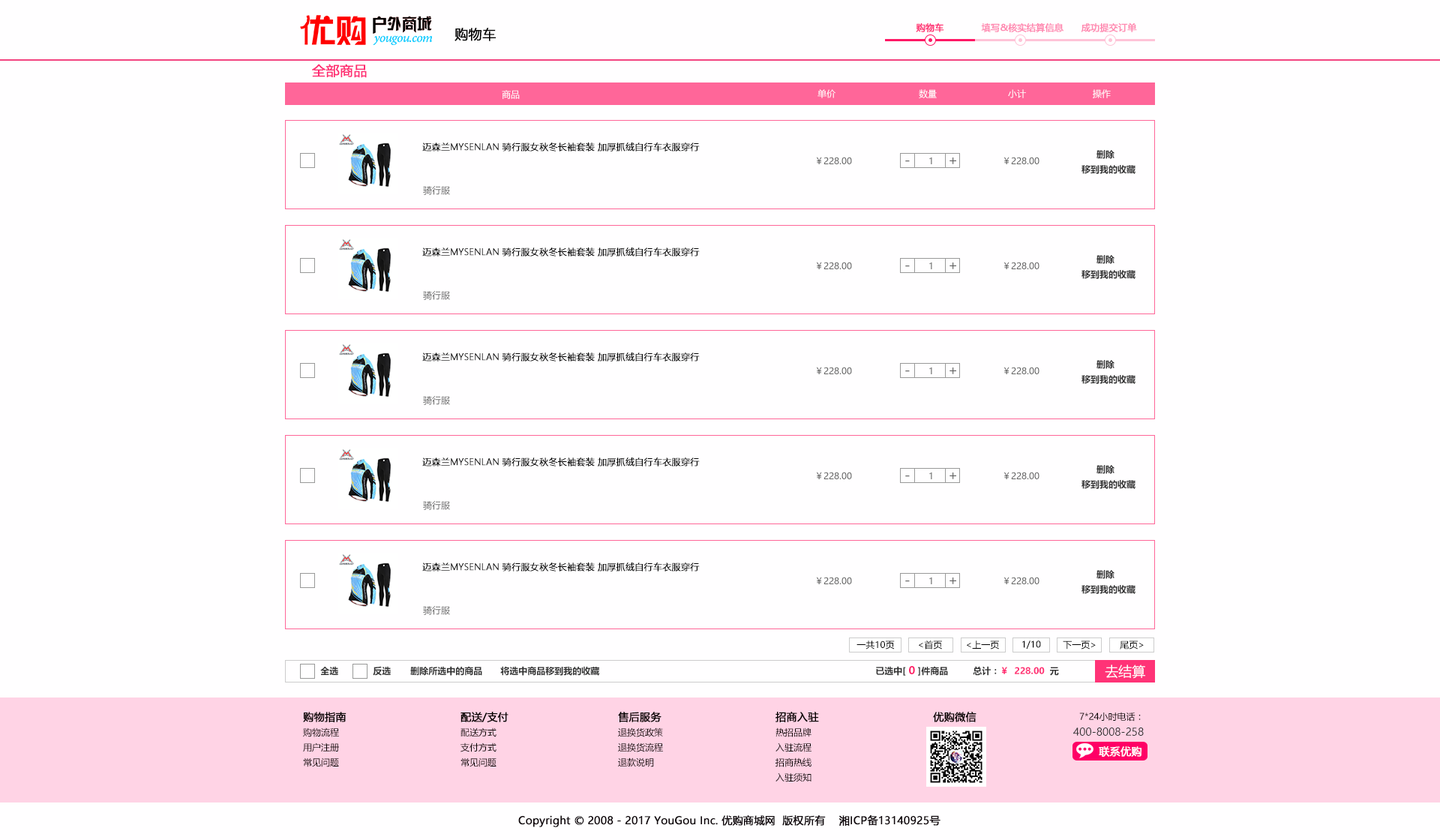
<style>
.page{position:relative;width:1440px;height:840px;background:#fffeff}
.page>*{position:absolute;margin:0}
.t1{font:13.5px "MicrosoftYaHei";color:#010000;font-weight:bold}
.t2{font:9px "MicrosoftYaHei";color:#ff2b72;font-weight:bold}
.t3{font:9px "MicrosoftYaHei";color:#ff88b0;font-weight:bold}
.t4{font:13.5px "MicrosoftYaHei";color:#ff2b72;font-weight:bold}
.t5{font:9px "MicrosoftYaHei";color:#ffffff}
.t6{font:9px "MicrosoftYaHeiLight";color:#000000;font-weight:bold}
.t7{font:9px "MicrosoftYaHei-Bold";color:#333333}
.t8{font:9px "MicrosoftYaHei";color:#666666}
.t9{font:13.5px "MicrosoftYaHei";color:#666666}
.t10{font:9px "MicrosoftYaHei"}
.t11{font:9px "MicrosoftYaHei";color:#000000}
.t12{font:13.5px "MicrosoftYaHei";color:#fefefe}
.t13{font:10.5px "MicrosoftYaHei-Bold";color:#ff236c}
.t14{font:9px "MicrosoftYaHei-Bold";color:#ff3176}
.t15{font:9px "MicrosoftYaHei-Bold";color:#ff2c72}
.t16{font:10.5px "MicrosoftYaHei";color:#040000;font-weight:bold}
.t17{font:9px "MicrosoftYaHei";color:#040000}
.t18{font:10.5px "MicrosoftYaHei";color:#323333}
.t19{font:10.5px "MicrosoftYaHei";color:#ffffff;font-weight:bold}
.t20{font:10.5px "MicrosoftYaHei";color:#0e050a;font-weight:bold}
</style>
<div class="page">
<p class="t1" style="left:454px;top:28px;width:42px;height:13px">购物车</p>
<p class="t2" style="left:916px;top:23px;width:28px;height:9px">购物车</p>
<p class="t3" style="left:981px;top:23px;width:83px;height:9px">填写&amp;核实结算信息</p>
<p class="t3" style="left:1081px;top:22px;width:56px;height:10px">成功提交订单</p>
<p class="t4" style="left:312px;top:64px;width:55px;height:14px">全部商品</p>
<p class="t5" style="left:818px;top:89px;width:18px;height:9px">单价</p>
<p class="t5" style="left:919px;top:89px;width:18px;height:9px">数量</p>
<p class="t5" style="left:1008px;top:89px;width:18px;height:9px">小计</p>
<p class="t5" style="left:1093px;top:89px;width:18px;height:9px">操作</p>
<p class="t5" style="left:502px;top:90px;width:18px;height:9px">商品</p>
<p class="t6" style="left:422px;top:142px;width:278px;height:10px">迈森兰MYSENLAN 骑行服女秋冬长袖套装 加厚抓绒自行车衣服穿行</p>
<p class="t7" style="left:1096px;top:150px;width:18px;height:9px">删除</p>
<p class="t8" style="left:816px;top:157px;width:36px;height:7px">￥228.00</p>
<p class="t9" style="left:905px;top:160px;width:5px;height:2px">-</p>
<p class="t10" style="left:929px;top:157px;width:3px;height:7px">1</p>
<p class="t9" style="left:950px;top:158px;width:6px;height:6px">+</p>
<p class="t8" style="left:1004px;top:157px;width:36px;height:7px">￥228.00</p>
<p class="t7" style="left:1082px;top:165px;width:54px;height:9px">移到我的收藏</p>
<p class="t8" style="left:423px;top:185px;width:27px;height:10px">骑行服</p>
<p class="t6" style="left:422px;top:248px;width:278px;height:8px">迈森兰MYSENLAN 骑行服女秋冬长袖套装 加厚抓绒自行车衣服穿行</p>
<p class="t7" style="left:1096px;top:255px;width:18px;height:9px">删除</p>
<p class="t8" style="left:816px;top:262px;width:36px;height:7px">￥228.00</p>
<p class="t9" style="left:905px;top:266px;width:5px;height:1px">-</p>
<p class="t10" style="left:929px;top:262px;width:3px;height:7px">1</p>
<p class="t9" style="left:950px;top:262px;width:6px;height:7px">+</p>
<p class="t8" style="left:1004px;top:262px;width:36px;height:7px">￥228.00</p>
<p class="t7" style="left:1082px;top:270px;width:54px;height:9px">移到我的收藏</p>
<p class="t8" style="left:423px;top:290px;width:27px;height:10px">骑行服</p>
<p class="t6" style="left:422px;top:352px;width:278px;height:10px">迈森兰MYSENLAN 骑行服女秋冬长袖套装 加厚抓绒自行车衣服穿行</p>
<p class="t7" style="left:1096px;top:360px;width:18px;height:9px">删除</p>
<p class="t8" style="left:816px;top:367px;width:36px;height:7px">￥228.00</p>
<p class="t9" style="left:905px;top:370px;width:5px;height:2px">-</p>
<p class="t10" style="left:929px;top:367px;width:3px;height:7px">1</p>
<p class="t9" style="left:950px;top:368px;width:6px;height:6px">+</p>
<p class="t8" style="left:1004px;top:367px;width:36px;height:7px">￥228.00</p>
<p class="t7" style="left:1082px;top:375px;width:54px;height:9px">移到我的收藏</p>
<p class="t8" style="left:423px;top:395px;width:27px;height:10px">骑行服</p>
<p class="t6" style="left:422px;top:458px;width:278px;height:8px">迈森兰MYSENLAN 骑行服女秋冬长袖套装 加厚抓绒自行车衣服穿行</p>
<p class="t8" style="left:816px;top:472px;width:36px;height:7px">￥228.00</p>
<p class="t10" style="left:929px;top:472px;width:3px;height:7px">1</p>
<p class="t9" style="left:950px;top:472px;width:6px;height:7px">+</p>
<p class="t8" style="left:1004px;top:472px;width:36px;height:7px">￥228.00</p>
<p class="t7" style="left:1096px;top:465px;width:18px;height:9px">删除</p>
<p class="t9" style="left:905px;top:476px;width:5px;height:1px">-</p>
<p class="t7" style="left:1082px;top:480px;width:54px;height:9px">移到我的收藏</p>
<p class="t8" style="left:423px;top:500px;width:27px;height:10px">骑行服</p>
<p class="t6" style="left:422px;top:562px;width:278px;height:10px">迈森兰MYSENLAN 骑行服女秋冬长袖套装 加厚抓绒自行车衣服穿行</p>
<p class="t8" style="left:816px;top:577px;width:36px;height:7px">￥228.00</p>
<p class="t9" style="left:905px;top:580px;width:5px;height:2px">-</p>
<p class="t10" style="left:929px;top:577px;width:3px;height:7px">1</p>
<p class="t9" style="left:950px;top:578px;width:6px;height:6px">+</p>
<p class="t8" style="left:1004px;top:577px;width:36px;height:7px">￥228.00</p>
<p class="t7" style="left:1096px;top:570px;width:18px;height:9px">删除</p>
<p class="t7" style="left:1082px;top:585px;width:54px;height:9px">移到我的收藏</p>
<p class="t8" style="left:423px;top:605px;width:27px;height:10px">骑行服</p>
<p class="t11" style="left:856px;top:640px;width:39px;height:10px">一共10页</p>
<p class="t11" style="left:919px;top:640px;width:23px;height:10px">&lt;首页</p>
<p class="t11" style="left:967px;top:640px;width:32px;height:10px">&lt;上一页</p>
<p class="t11" style="left:1022px;top:640px;width:19px;height:9px">1/10</p>
<p class="t11" style="left:1063px;top:640px;width:33px;height:10px">下一页&gt;</p>
<p class="t11" style="left:1120px;top:640px;width:24px;height:10px">尾页&gt;</p>
<p class="t12" style="left:1105px;top:664px;width:40px;height:15px">去结算</p>
<p class="t7" style="left:320px;top:666px;width:18px;height:9px">全选</p>
<p class="t7" style="left:373px;top:666px;width:18px;height:10px">反选</p>
<p class="t7" style="left:410px;top:666px;width:72px;height:10px">删除所选中的商品</p>
<p class="t7" style="left:500px;top:666px;width:99px;height:10px">将选中商品移到我的收藏</p>
<p class="t7" style="left:876px;top:666px;width:72px;height:10px">已选中[ <span class="t13">0</span> ]件商品</p>
<p class="t14" style="left:973px;top:666px;width:86px;height:10px"><span class="t7">总计：</span><span class="t15">￥  </span>228.00  <span class="t7">元</span></p>
<p class="t16" style="left:303px;top:712px;width:43px;height:10px">购物指南</p>
<p class="t16" style="left:460px;top:712px;width:48px;height:10px">配送/支付</p>
<p class="t16" style="left:618px;top:712px;width:44px;height:10px">售后服务</p>
<p class="t16" style="left:776px;top:712px;width:43px;height:10px">招商入驻</p>
<p class="t16" style="left:933px;top:712px;width:43px;height:10px">优购微信</p>
<p class="t17" style="left:1079px;top:712px;width:62px;height:10px">7*24小时电话：</p>
<p class="t17" style="left:303px;top:728px;width:36px;height:9px">购物流程</p>
<p class="t17" style="left:460px;top:728px;width:36px;height:9px">配送方式</p>
<p class="t17" style="left:618px;top:728px;width:45px;height:9px">退换货政策</p>
<p class="t17" style="left:776px;top:728px;width:36px;height:9px">热招品牌</p>
<p class="t18" style="left:1073px;top:728px;width:71px;height:8px">400-8008-258</p>
<p class="t17" style="left:303px;top:742px;width:36px;height:10px">用户注册</p>
<p class="t17" style="left:460px;top:742px;width:36px;height:10px">支付方式</p>
<p class="t17" style="left:618px;top:742px;width:45px;height:10px">退换货流程</p>
<p class="t17" style="left:776px;top:742px;width:36px;height:10px">入驻流程</p>
<p class="t19" style="left:1099px;top:746px;width:43px;height:11px">联系优购</p>
<p class="t17" style="left:303px;top:758px;width:36px;height:9px">常见问题</p>
<p class="t17" style="left:460px;top:758px;width:36px;height:9px">常见问题</p>
<p class="t17" style="left:618px;top:758px;width:36px;height:9px">退款说明</p>
<p class="t17" style="left:776px;top:758px;width:36px;height:9px">招商热线</p>
<p class="t17" style="left:776px;top:772px;width:36px;height:10px">入驻须知</p>
<p class="t20" style="left:518px;top:814px;width:422px;height:13px">Copyright © 2008 - 2017 YouGou Inc. 优购商城网  版权所有    湘ICP备13140925号</p>
</div>
